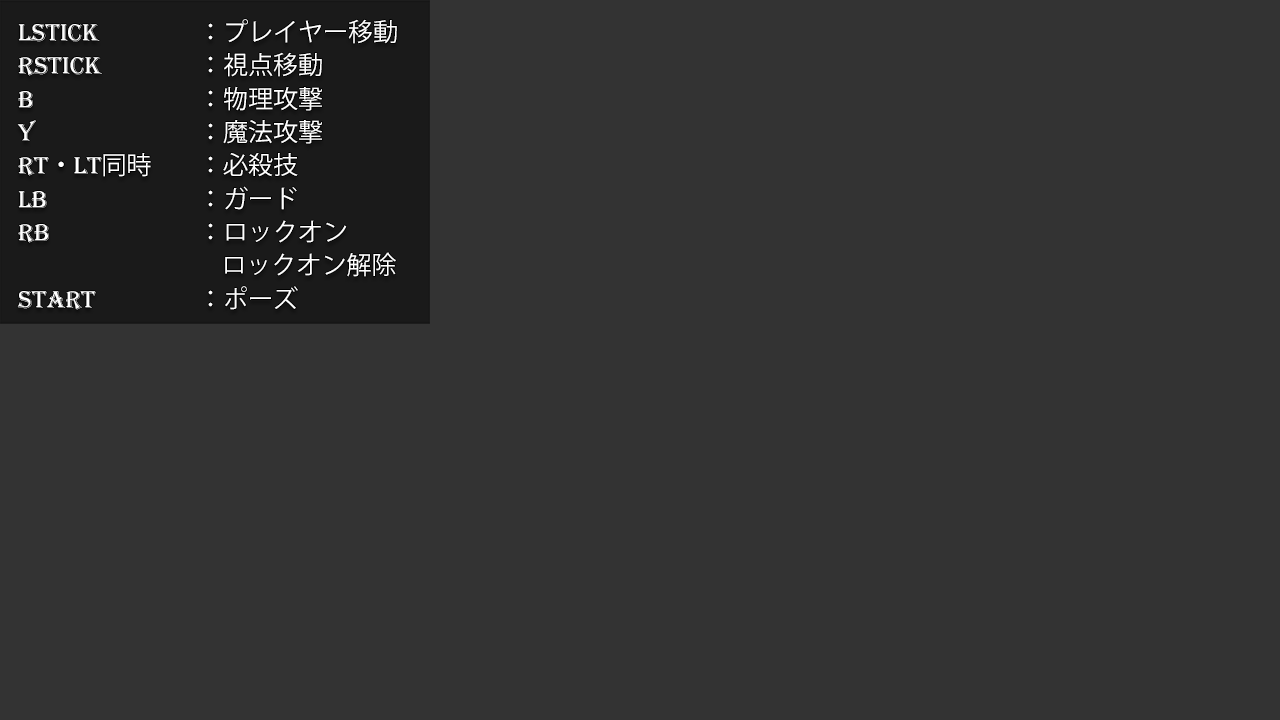
<style>
.page{position:relative;width:1280px;height:720px;background:#333333}
.page>*{position:absolute;margin:0}
.t1{font:25px/33.3px "KozGoPr6N-Regular";color:#ffffff}
.t2{font:25px/33.3px "Algerian";color:#ffffff}
</style>
<div class="page">
<p class="t1" style="left:17px;top:19px;width:380px;height:291px"><span class="t2">LStick    </span>：プレイヤー移動<span class="t2"><br>RStick    </span>：視点移動<span class="t2"><br>B     </span>：物理攻撃<span class="t2"><br>Y     </span>：魔法攻撃<span class="t2"><br>RT</span>・<span class="t2">LT</span>同時  ：必殺技<span class="t2"><br>LB     </span>：ガード<span class="t2"><br>RB     </span>：ロックオン<br>         ロックオン解除<br><span class="t2">START   </span>：ポーズ</p>
</div>
